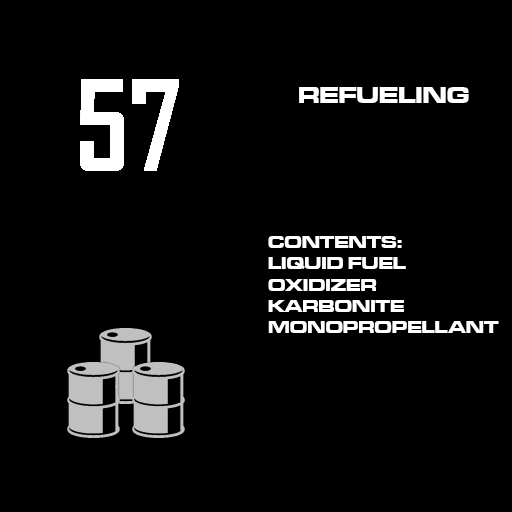
<style>
.page{position:relative;width:512px;height:512px;background:#000000}
.page>*{position:absolute;margin:0}
.t1{font:23.7px "MicrogrammaD-BoldExte";color:#ffffff}
.t2{font:17.8px "MicrogrammaD-BoldExte";color:#ffffff}
</style>
<div class="page">
<p class="t1" style="left:299px;top:87px;width:170px;height:16px">REFUELING</p>
<p class="t2" style="left:268px;top:236px;width:231px;height:97px">CONTENTS:<br>LIQUID FUEL<br>OXIDIZER<br>KARBONITE<br>MONOPROPELLANT</p>
</div>
